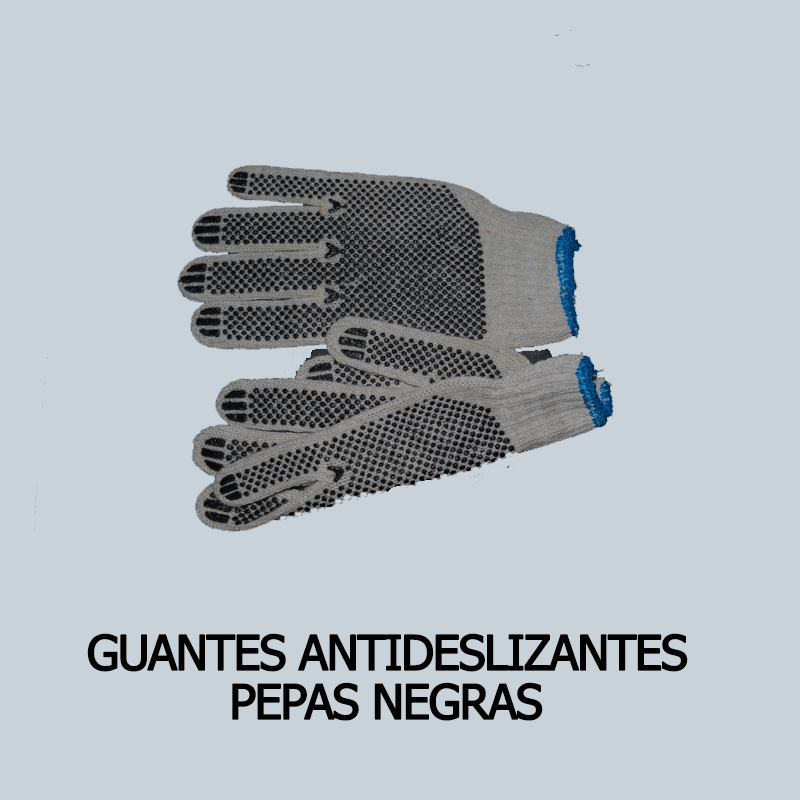
<style>
.page{position:relative;width:800px;height:800px;background:#c9d2d8}
.page>*{position:absolute;margin:0}
.t1{font:48px "Tahoma";letter-spacing:-0.05em;color:#020202;font-weight:bold}
</style>
<div class="page">
<p class="t1" style="left:87px;top:633px;width:601px;height:39px">GUANTES ANTIDESLIZANTES</p>
<p class="t1" style="left:232px;top:682px;width:311px;height:39px">PEPAS NEGRAS</p>
</div>
